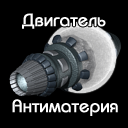
<style>
.page{position:relative;width:128px;height:128px;background:#000000}
.page>*{position:absolute;margin:0}
.t1{font:18px "BauhausC-Medium";color:#ffffff;font-weight:bold}
</style>
<div class="page">
<p class="t1" style="left:22px;top:13px;width:84px;height:16px">Двигатель</p>
<p class="t1" style="left:12px;top:99px;width:106px;height:17px">Антиматерия</p>
</div>
